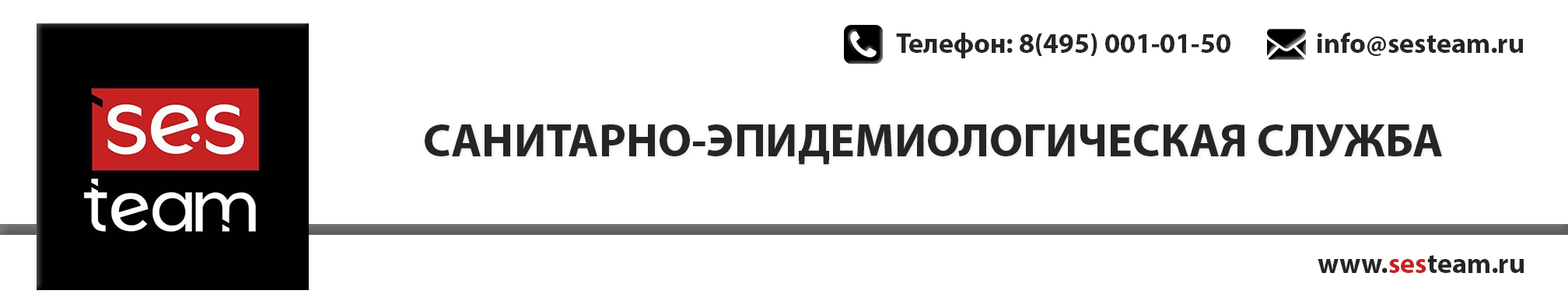
<style>
.page{position:relative;width:1568px;height:308px;background:#ffffff}
.page>*{position:absolute;margin:0}
.t1{font:28px "MyriadPro-Bold";color:#252525}
.t2{font:46.7px "MyriadPro-Bold";color:#252525}
.t3{font:28px "MyriadPro-Bold";color:#c72123}
</style>
<div class="page">
<p class="t1" style="left:896px;top:33px;width:334px;height:25px">Телефон: 8(495) 001-01-50</p>
<p class="t1" style="left:1318px;top:33px;width:206px;height:23px">info@sesteam.ru</p>
<p class="t2" style="left:425px;top:124px;width:1017px;height:41px">САНИТАРНО-ЭПИДЕМИОЛОГИЧЕСКАЯ СЛУЖБА</p>
<p class="t1" style="left:1318px;top:255px;width:206px;height:18px">www.<span class="t3">ses</span>team.ru</p>
</div>
